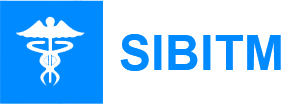
<style>
.page{position:relative;width:284px;height:104px;background:#ffffff}
.page>*{position:absolute;margin:0}
.t1{font:48px "Arial-BoldMT";letter-spacing:0.01em;color:#008aff}
</style>
<div class="page">
<p class="t1" style="left:120px;top:34px;width:161px;height:37px">SIBITM</p>
</div>
